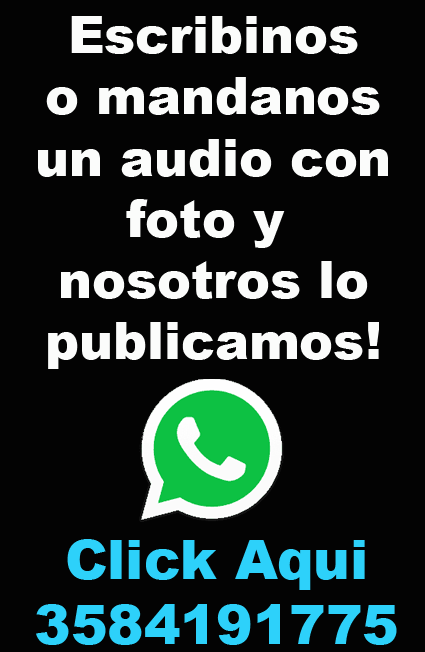
<style>
.page{position:relative;width:425px;height:652px;background:#030303}
.page>*{position:absolute;margin:0}
.t1{font:50.9px "Arial-Black";color:#fbfcfb}
.t2{font:54.6px "Arial-Black";color:#2dd1fa}
</style>
<div class="page">
<p class="t1" style="left:38px;top:16px;width:350px;height:353px;text-align:center">Escribinos<br>o mandanos<br>un audio con<br>foto y <br>nosotros lo<br>publicamos!</p>
<p class="t2" style="left:36px;top:539px;width:361px;height:106px;text-align:center">Click Aqui<br>3584191775</p>
</div>
